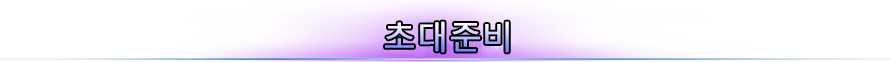
<style>
.page{position:relative;width:890px;height:62px;background:#ffffff}
.page>*{position:absolute;margin:0}
.t1{font:32px "MalgunGothicRegular";font-weight:bold}
</style>
<div class="page">
<p class="t1" style="left:385px;top:21px;width:124px;height:32px">초대준비</p>
</div>
